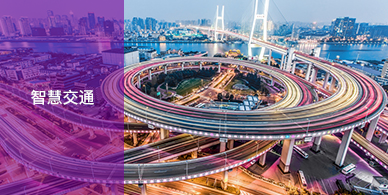
<style>
.page{position:relative;width:388px;height:195px}
.page>*{position:absolute;margin:0}
.t1{font:16px "PingFangSC-Medium";color:#fbfbfb}
</style>
<div class="page">
<p class="t1" style="left:31px;top:89px;width:63px;height:16px">智慧交通</p>
</div>
